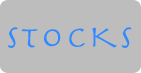
<style>
.page{position:relative;width:141px;height:73px;background:#bdbdbd}
.page>*{position:absolute;margin:0}
.t1{font:31.4px "Herculanum";letter-spacing:0.065em;color:#308bfc;scale:1.12 1}
</style>
<div class="page">
<p class="t1" style="left:8px;top:27px;width:124px;height:21px">StOCKS</p>
</div>
